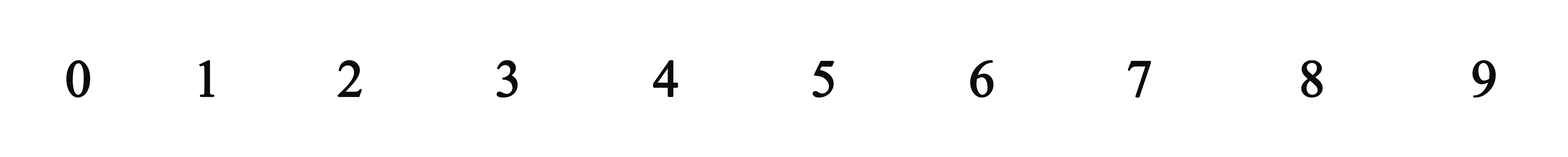
<style>
.page{position:relative;width:1568px;height:157px;background:#ffffff}
.page>*{position:absolute;margin:0}
.t1{font:52.3px "TimesNewRomanPSMT";color:#0c0c0c;font-weight:bold}
</style>
<div class="page">
<p class="t1" style="left:66px;top:60px;width:1430px;height:38px">9          8          7         6         5         4         3         2        1       0</p>
</div>
